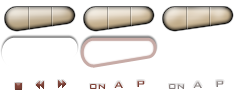
<style>
.page{position:relative;width:237px;height:102px;background:#ffffff}
.page>*{position:absolute;margin:0}
.t1{font:12px "BankGothicBT-Medium";color:#83453a}
.t2{font:12px "BankGothicBT-Medium";color:#8d8685}
.t3{font:12px "BankGothicBT-Medium";color:#8e8786}
</style>
<div class="page">
<p class="t1" style="left:90px;top:84px;width:15px;height:5px">on</p>
<p class="t1" style="left:114px;top:81px;width:9px;height:7px">A</p>
<p class="t1" style="left:137px;top:80px;width:8px;height:7px">P</p>
<p class="t2" style="left:169px;top:84px;width:15px;height:5px">on</p>
<p class="t3" style="left:193px;top:81px;width:9px;height:7px">A</p>
<p class="t2" style="left:216px;top:80px;width:8px;height:7px">P</p>
</div>
